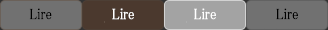
<style>
.page{position:relative;width:328px;height:30px;background:#717171}
.page>*{position:absolute;margin:0}
.t1{font:15.2px "MS-PMincho";color:#000000;font-weight:bold;scale:0.84 1}
.t2{font:15.2px "MS-PMincho";color:#ffffff;font-weight:bold;scale:0.84 1}
.t3{font:11.4px "MS-PMincho";color:#ffffff;font-weight:bold;scale:0.84 1}
</style>
<div class="page">
<p class="t1" style="left:29px;top:8px;width:23px;height:12px">Lire</p>
<p class="t2" style="left:112px;top:8px;width:22px;height:12px">Lire</p>
<p class="t3" style="left:194px;top:8px;width:22px;height:12px">Lire</p>
<p class="t1" style="left:276px;top:8px;width:22px;height:12px">Lire</p>
</div>
